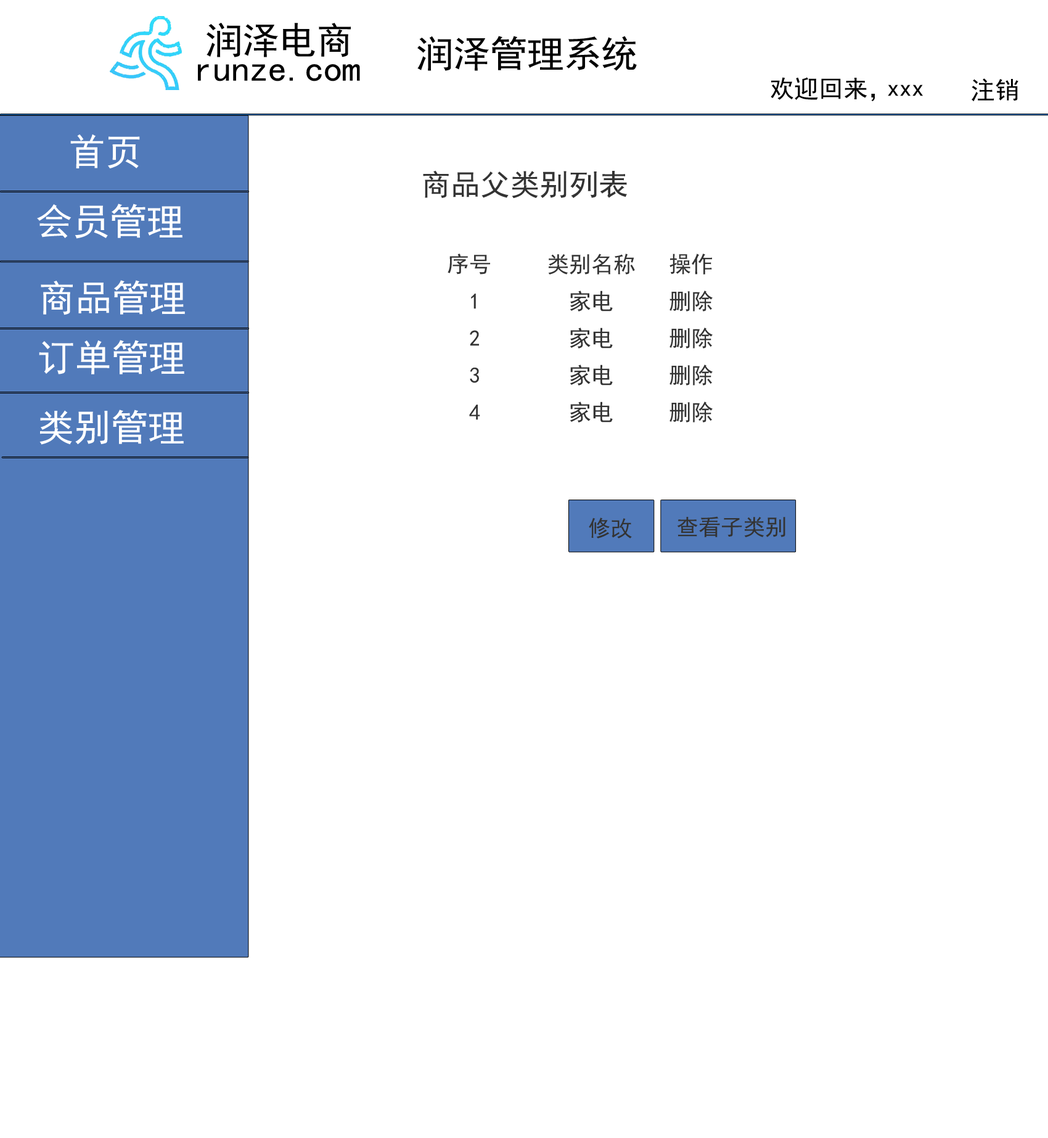
<style>
.page{position:relative;width:1048px;height:1138px;background:#ffffff}
.page>*{position:absolute;margin:0}
.t1{font:37px "SimHei";color:#010101}
.t2{font:24.7px "SimHei";color:#000000}
.t3{font:37px "SimHei";color:#ffffff}
.t4{font:29.6px "SimHei";color:#333333}
.t5{font:22.2px/18.5px "SimHei";color:#333333}
.t6{font:22.2px "SimHei";color:#333333}
</style>
<div class="page">
<p class="t1" style="left:207px;top:23px;width:144px;height:34px">润泽电商</p>
<p class="t1" style="left:417px;top:36px;width:220px;height:35px">润泽管理系统</p>
<p class="t1" style="left:198px;top:64px;width:162px;height:17px">runze.com</p>
<p class="t2" style="left:771px;top:77px;width:104px;height:24px">欢迎回来，</p>
<p class="t2" style="left:888px;top:84px;width:35px;height:12px">xxx</p>
<p class="t2" style="left:972px;top:78px;width:47px;height:24px">注销</p>
<p class="t3" style="left:70px;top:134px;width:70px;height:34px">首页</p>
<p class="t4" style="left:423px;top:170px;width:204px;height:29px">商品父类别列表</p>
<p class="t3" style="left:37px;top:203px;width:146px;height:36px">会员管理</p>
<p class="t5" style="left:448px;top:253px;width:265px;height:169px">序号     类别名称   操作<br> <br>  1        家电     删除<br><br>  2        家电     删除<br><br>  3        家电     删除<br><br>  4        家电     删除</p>
<p class="t3" style="left:41px;top:280px;width:144px;height:35px">商品管理</p>
<p class="t3" style="left:39px;top:340px;width:145px;height:34px">订单管理</p>
<p class="t3" style="left:39px;top:409px;width:145px;height:36px">类别管理</p>
<p class="t6" style="left:589px;top:517px;width:43px;height:21px">修改</p>
<p class="t6" style="left:677px;top:516px;width:109px;height:21px">查看子类别</p>
</div>
